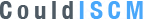
<style>
.page{position:relative;width:144px;height:20px;background:#ffffff}
.page>*{position:absolute;margin:0}
.t1{font:25.3px "HelveticaNeue-CondensedBold";letter-spacing:0.18em;color:#4e5a64}
.t2{font:25.3px "HelveticaNeue-CondensedBold";letter-spacing:0.18em;color:#49a7fa}
</style>
<div class="page">
<p class="t1" style="left:0px;top:1px;width:143px;height:18px">Could<span class="t2">ISCM</span></p>
</div>
